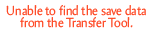
<style>
.page{position:relative;width:154px;height:32px;background:#ffffff}
.page>*{position:absolute;margin:0}
.t1{font:13.2px/12px "Amira-Roman";color:#fe4d2a;scale:0.91 1}
</style>
<div class="page">
<p class="t1" style="left:6px;top:5px;width:140px;height:23px;text-align:center">Unable to find the save data from the Transfer Tool.</p>
</div>
